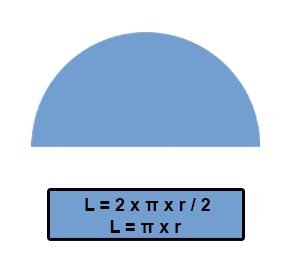
<style>
.page{position:relative;width:294px;height:264px;background:#ffffff}
.page>*{position:absolute;margin:0}
.t1{font:18px "Arial-BoldMT";color:#000000}
</style>
<div class="page">
<p class="t1" style="left:85px;top:198px;width:125px;height:13px">L = 2 x π x r / 2</p>
<p class="t1" style="left:110px;top:220px;width:72px;height:13px">L = π x r</p>
</div>
